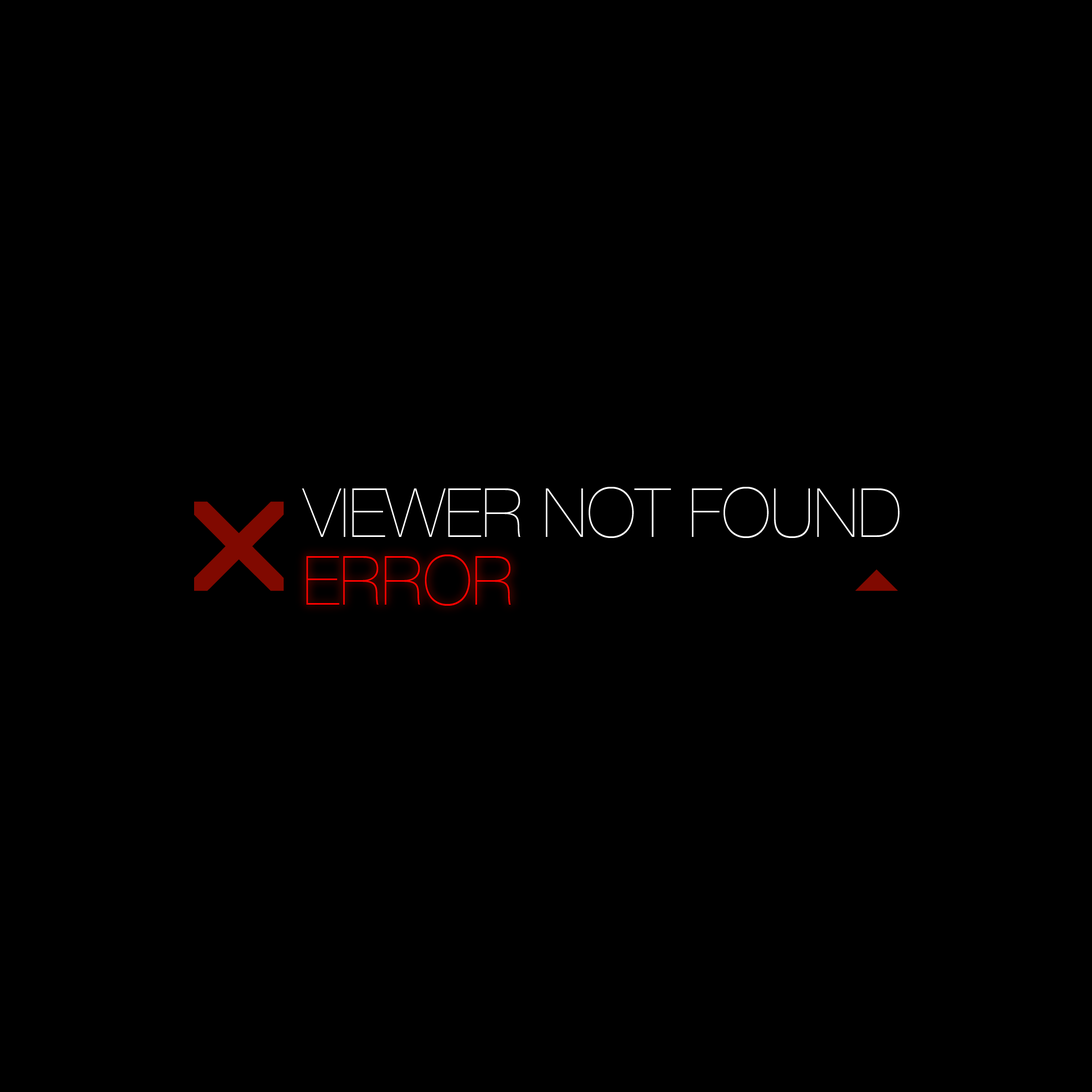
<style>
.page{position:relative;width:1092px;height:1092px;background:#000000}
.page>*{position:absolute;margin:0}
.t1{font:68.2px "HelveticaNeueLTCom-UltLt";color:#ffffff}
.t2{font:68.2px "HelveticaNeueLTCom-UltLt";color:#fe0000}
</style>
<div class="page">
<p class="t1" style="left:302px;top:487px;width:598px;height:51px">VIEWER NOT FOUND</p>
<p class="t2" style="left:306px;top:555px;width:205px;height:51px">ERROR</p>
</div>
